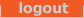
<style>
.page{position:relative;width:84px;height:18px;background:#f15b23}
.page>*{position:absolute;margin:0}
.t1{font:14px "Verdana-Bold";color:#c7cfd6}
</style>
<div class="page">
<p class="t1" style="left:19px;top:2px;width:50px;height:14px">logout</p>
</div>
